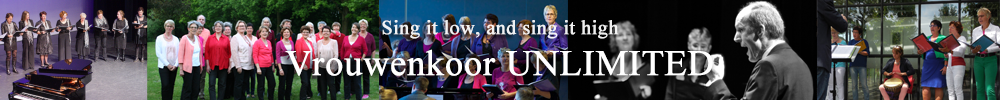
<style>
.page{position:relative;width:1000px;height:100px}
.page>*{position:absolute;margin:0}
.t1{font:20px "TimesNewRomanPSMT";color:#ffffff;font-weight:bold}
.t2{font:36px "TimesNewRomanPSMT";color:#ffffff;font-weight:bold}
</style>
<div class="page">
<p class="t1" style="left:382px;top:20px;width:237px;height:19px;opacity:0.9">Sing it low, and sing it high</p>
<p class="t2" style="left:285px;top:49px;width:428px;height:27px">Vrouwenkoor UNLIMITED</p>
</div>
